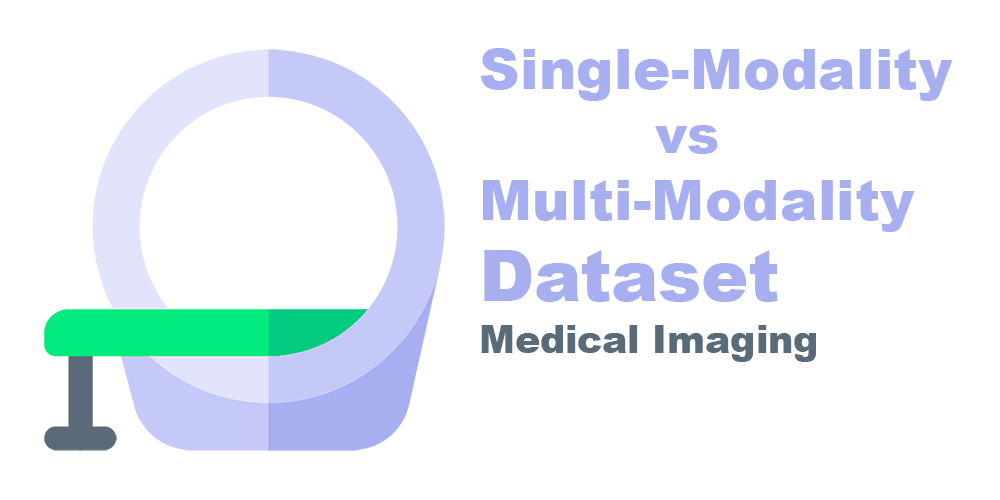
<style>
.page{position:relative;width:1000px;height:500px;background:#ffffff}
.page>*{position:absolute;margin:0}
.t1{font:56.4px "Arial-Black";color:#a8aff1}
.t2{font:52.7px "Arial-Black";color:#a8aff1}
.t3{font:70.5px "Arial-Black";color:#a8aff1}
.t4{font:37.6px "Arial-Black";color:#5a6a78}
</style>
<div class="page">
<p class="t1" style="left:481px;top:48px;width:472px;height:184px">Single-Modality<br><span class="t2">          vs<br></span>Multi-Modality</p>
<p class="t3" style="left:484px;top:250px;width:294px;height:52px">Dataset</p>
<p class="t4" style="left:481px;top:325px;width:335px;height:37px">Medical Imaging</p>
</div>
